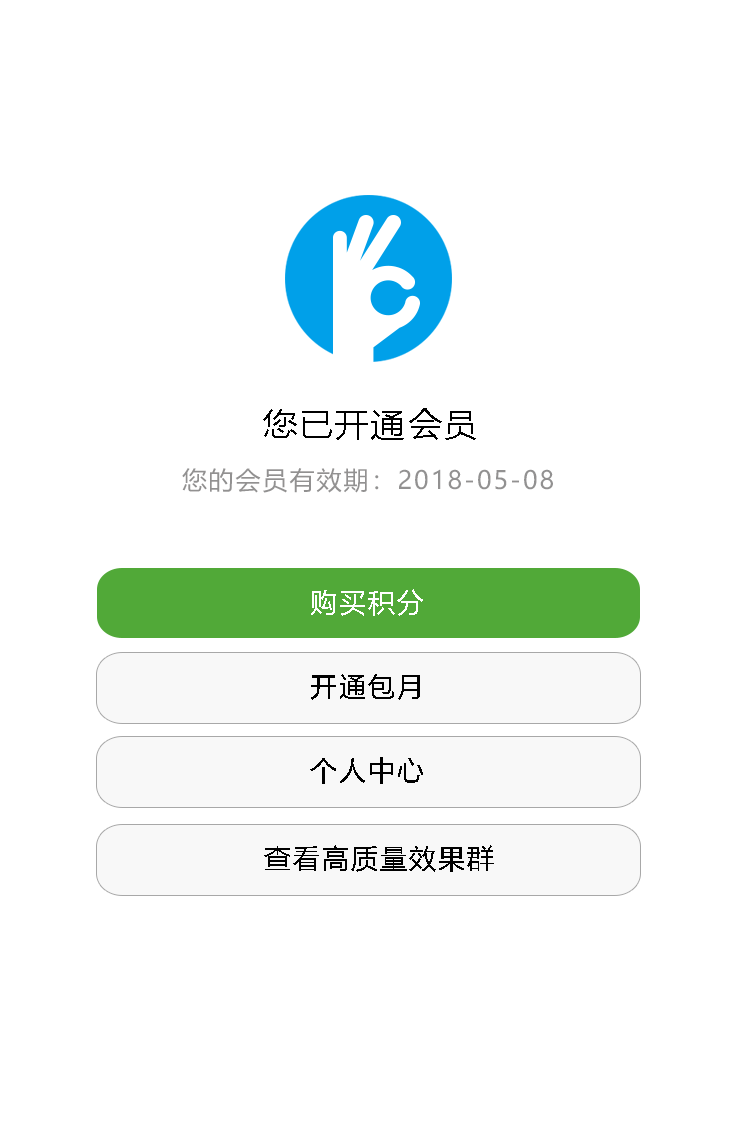
<style>
.page{position:relative;width:740px;height:1136px;background:#ffffff}
.page>*{position:absolute;margin:0}
.t1{font:33.5px "MicrosoftYaHei";letter-spacing:0.08em;color:#000000}
.t2{font:25px "MicrosoftYaHei";letter-spacing:0.08em;color:#929191}
.t3{font:27.3px "MicrosoftYaHei";letter-spacing:0.08em;color:#ffffff}
.t4{font:27.3px "MicrosoftYaHei";letter-spacing:0.08em;color:#000000}
</style>
<div class="page">
<p class="t1" style="left:263px;top:408px;width:213px;height:32px">您已开通会员</p>
<p class="t2" style="left:182px;top:468px;width:371px;height:25px">您的会员有效期：2018-05-08</p>
<p class="t3" style="left:311px;top:589px;width:112px;height:27px">购买积分</p>
<p class="t4" style="left:311px;top:674px;width:109px;height:26px">开通包月</p>
<p class="t4" style="left:310px;top:757px;width:113px;height:27px">个人中心</p>
<p class="t4" style="left:264px;top:845px;width:230px;height:27px">查看高质量效果群</p>
</div>
